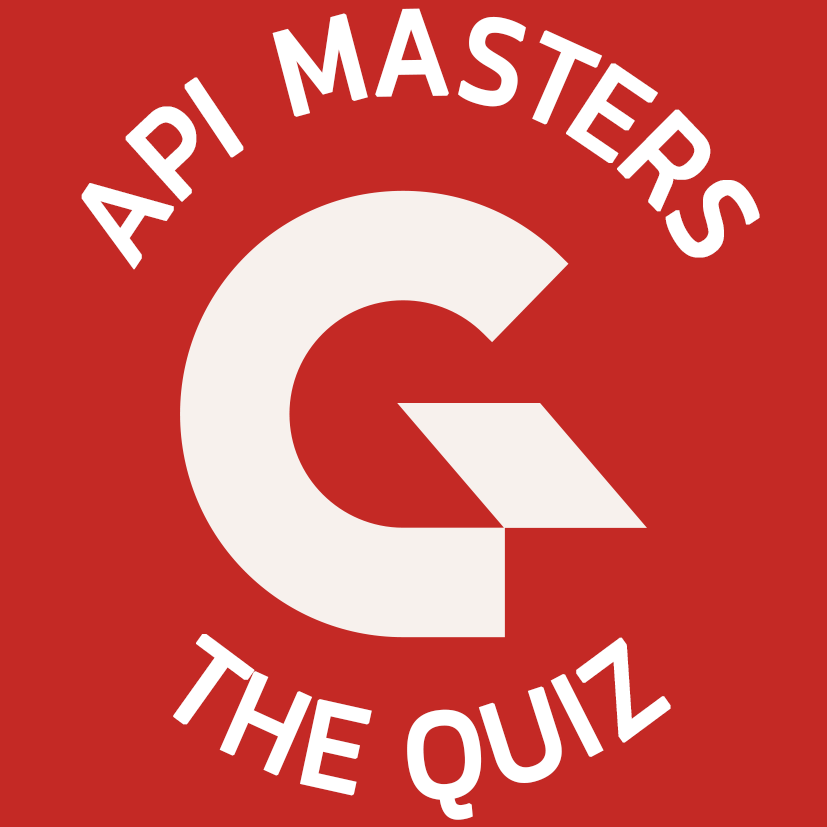
<style>
.page{position:relative;width:827px;height:827px;background:#c42925}
.page>*{position:absolute;margin:0}
.t1{font:130px "Kanit-Regular";letter-spacing:-0.04em;color:#ffffff;font-weight:bold;scale:0.88 1}
.t2{font:130px "Kanit-Regular";letter-spacing:-0.02em;color:#ffffff;font-weight:bold;scale:0.88 1}
.t3{font:130px "Kanit-Regular";letter-spacing:-0.08em;color:#ffffff;font-weight:bold;scale:0.88 1}
.t4{font:130px "Kanit-Regular";letter-spacing:-0.12em;color:#ffffff;font-weight:bold;scale:0.88 1}
.t5{font:130px "Kanit-Regular";letter-spacing:0.08em;color:#ffffff;font-weight:bold;scale:0.88 1}
</style>
<div class="page">
<p class="t1" style="left:81px;top:8px;width:679px;height:262px;rotate:-180deg">API  M<span class="t2">A</span><span class="t3">S</span><span class="t4">T</span>ERS</p>
<p class="t5" style="left:173px;top:634px;width:498px;height:186px">THE QUIZ</p>
</div>
